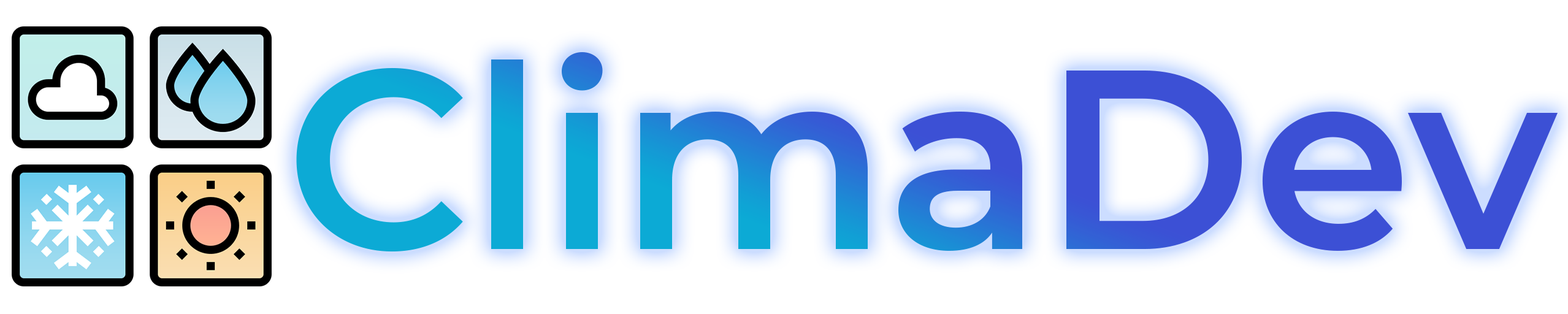
<style>
.page{position:relative;width:1568px;height:314px;background:#ffffff}
.page>*{position:absolute;margin:0}
.t1{font:255px "Montserrat-SemiBold"}
</style>
<div class="page">
<p class="t1" style="left:296px;top:52px;width:1262px;height:200px">ClimaDev</p>
</div>
